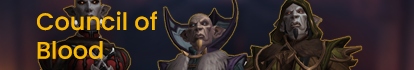
<style>
.page{position:relative;width:414px;height:70px}
.page>*{position:absolute;margin:0}
.t1{font:24px "Poppins-Medium";color:#f8b700}
</style>
<div class="page">
<p class="t1" style="left:37px;top:11px;width:120px;height:48px">Council of <br>Blood</p>
</div>
